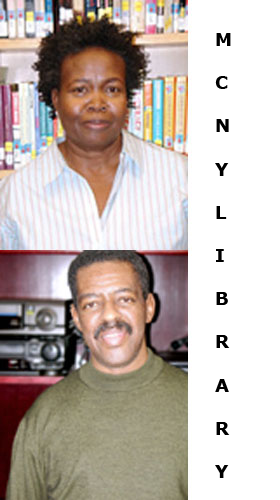
<style>
.page{position:relative;width:280px;height:500px;background:#ffffff}
.page>*{position:absolute;margin:0}
.t1{font:18px "Verdana-Bold";color:#000000}
</style>
<div class="page">
<p class="t1" style="left:215px;top:33px;width:16px;height:445px">M<br><br>C<br><br>N<br><br>Y<br><br>L<br><br>I<br><br>B<br><br>R<br><br>A<br><br>R<br><br>Y</p>
</div>
